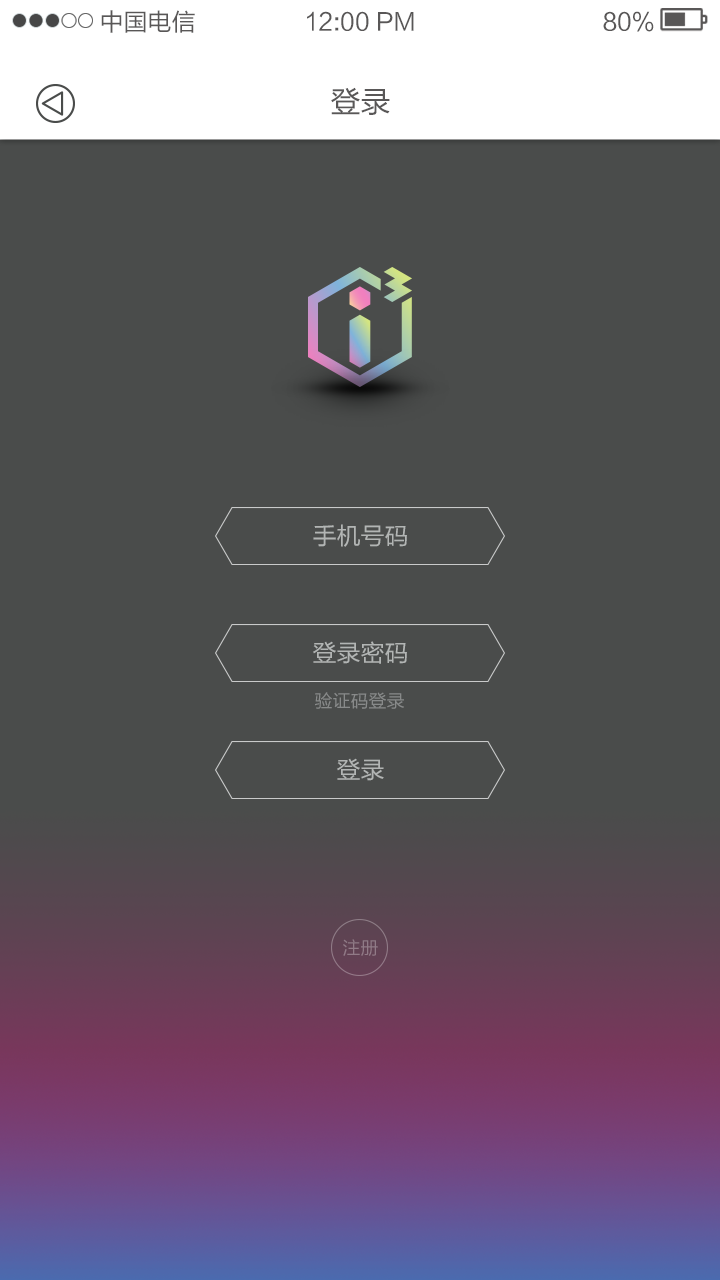
<style>
.page{position:relative;width:720px;height:1280px;background:#4a4c4b}
.page>*{position:absolute;margin:0}
.t1{font:24px "FZLTHK--GBK1-0";color:#595757}
.t2{font:30px "FZLTHK--GBK1-0";color:#595757}
.t3{font:24px/117px "FZLTHK--GBK1-0";color:#b2b5b4}
.t4{font:18px "FZLTHK--GBK1-0";color:#888a8a}
</style>
<div class="page">
<p class="t1" style="left:101px;top:10px;width:94px;height:23px">中国电信</p>
<p class="t1" style="left:307px;top:11px;width:107px;height:20px">12:00 PM</p>
<p class="t1" style="left:603px;top:11px;width:51px;height:21px">80%</p>
<p class="t2" style="left:331px;top:87px;width:59px;height:28px">登录</p>
<p class="t3" style="left:313px;top:524px;width:94px;height:257px;text-align:center">手机号码<br>登录密码<br>登录</p>
<p class="t4" style="left:315px;top:692px;width:89px;height:17px">验证码登录</p>
</div>
